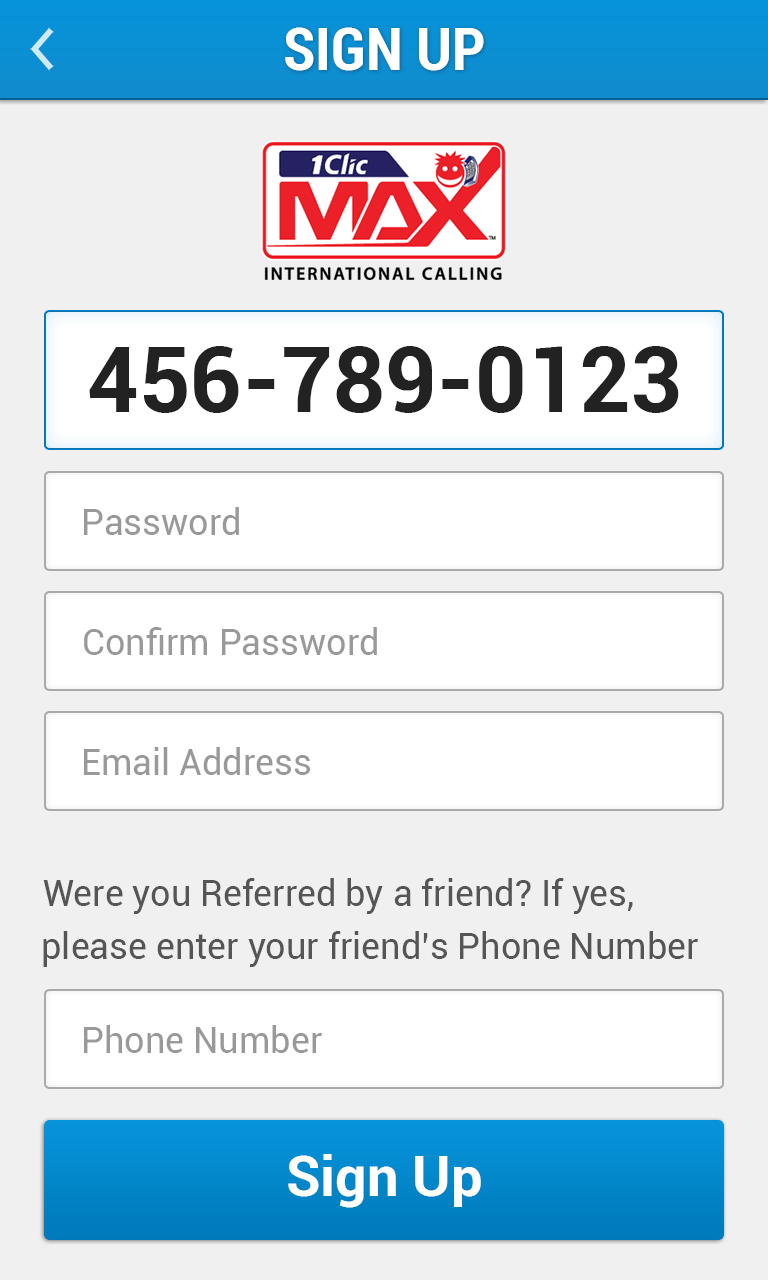
<style>
.page{position:relative;width:768px;height:1280px;background:#f0f0f0}
.page>*{position:absolute;margin:0}
.t1{font:60px "Roboto-BoldCondensed";color:#ffffff}
.t2{font:90px "Roboto-Bold";color:#222222}
.t3{font:36px "Roboto-Regular";color:#999999}
.t4{font:36px "Roboto-Regular";color:#555555}
.t5{font:56px "Roboto-Bold";color:#ffffff}
</style>
<div class="page">
<p class="t1" style="left:285px;top:27px;width:199px;height:44px">SIGN UP</p>
<p class="t2" style="left:89px;top:346px;width:590px;height:67px">456-789-0123</p>
<p class="t3" style="left:84px;top:507px;width:155px;height:28px">Password</p>
<p class="t3" style="left:84px;top:627px;width:293px;height:28px">Confirm Password</p>
<p class="t3" style="left:84px;top:747px;width:226px;height:28px">Email Address</p>
<p class="t4" style="left:43px;top:878px;width:590px;height:36px">Were you Referred by a friend? If yes,</p>
<p class="t4" style="left:43px;top:931px;width:655px;height:36px">please enter your friend’s Phone Number</p>
<p class="t3" style="left:84px;top:1025px;width:238px;height:28px">Phone Number</p>
<p class="t5" style="left:288px;top:1154px;width:193px;height:54px">Sign Up</p>
</div>
